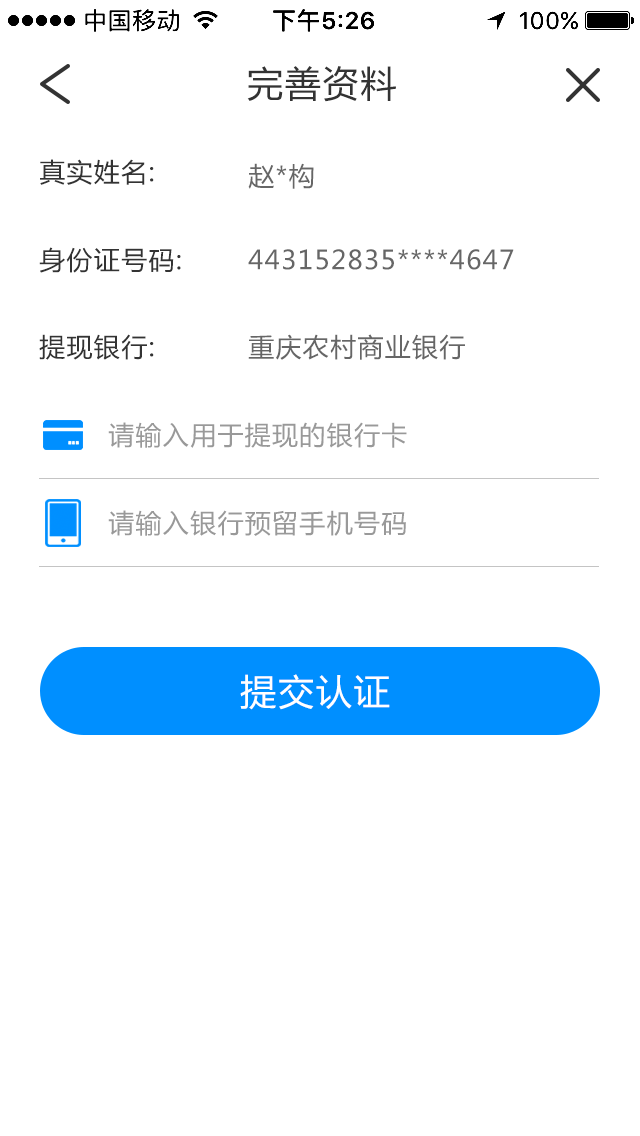
<style>
.page{position:relative;width:640px;height:1136px;background:#ffffff}
.page>*{position:absolute;margin:0}
.t1{font:36px "MicrosoftYaHei";letter-spacing:0.05em;color:#333333}
.t2{font:26px "MicrosoftYaHei";letter-spacing:0.05em;color:#333333}
.t3{font:26px "MicrosoftYaHei";letter-spacing:0.05em;color:#666666}
.t4{font:26px "MicrosoftYaHei";letter-spacing:0.05em;color:#999999}
.t5{font:36px "MicrosoftYaHei";letter-spacing:0.05em;color:#ffffff}
</style>
<div class="page">
<p class="t1" style="left:247px;top:66px;width:149px;height:36px">完善资料</p>
<p class="t2" style="left:40px;top:159px;width:114px;height:26px">真实姓名:</p>
<p class="t3" style="left:248px;top:163px;width:66px;height:26px">赵*构</p>
<p class="t2" style="left:39px;top:247px;width:142px;height:26px">身份证号码:</p>
<p class="t3" style="left:248px;top:249px;width:266px;height:21px">443152835****4647</p>
<p class="t2" style="left:39px;top:334px;width:115px;height:26px">提现银行:</p>
<p class="t3" style="left:248px;top:334px;width:217px;height:26px">重庆农村商业银行</p>
<p class="t4" style="left:108px;top:422px;width:299px;height:26px">请输入用于提现的银行卡</p>
<p class="t4" style="left:108px;top:510px;width:298px;height:26px">请输入银行预留手机号码</p>
<p class="t5" style="left:240px;top:674px;width:150px;height:36px">提交认证</p>
</div>
